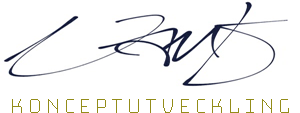
<style>
.page{position:relative;width:300px;height:113px;background:#ffffff}
.page>*{position:absolute;margin:0}
.t1{font:24px "BungeeHairline-Regular";color:#938c19}
</style>
<div class="page">
<p class="t1" style="left:12px;top:99px;width:277px;height:14px">konceptutveckling</p>
</div>
